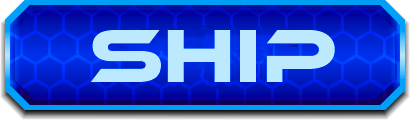
<style>
.page{position:relative;width:410px;height:121px}
.page>*{position:absolute;margin:0}
.t1{font:77px "EthnocentricRg-Regular";color:#bde9ff}
</style>
<div class="page">
<p class="t1" style="left:90px;top:30px;width:245px;height:52px">SHIP</p>
</div>
